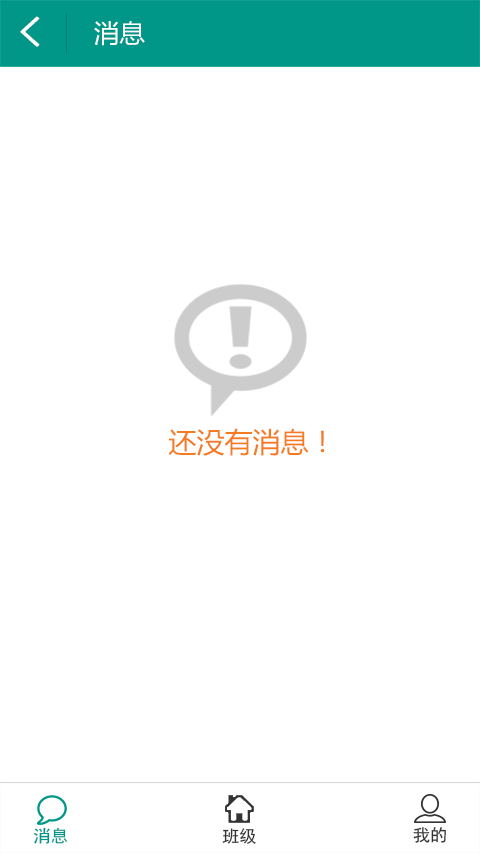
<style>
.page{position:relative;width:480px;height:853px;background:#ffffff}
.page>*{position:absolute;margin:0}
.t1{font:41.3px "SimHei";color:#ffffff;font-weight:bold}
.t2{font:25.3px "MicrosoftYaHei";color:#ffffff}
.t3{font:28px "MicrosoftYaHei";color:#f67b20}
.t4{font:17.3px "SimHei";color:#009788}
.t5{font:17.3px "SimHei";color:#333333}
</style>
<div class="page">
<p class="t1" style="left:20px;top:16px;width:20px;height:31px">&lt;</p>
<p class="t2" style="left:94px;top:21px;width:51px;height:25px">消息</p>
<p class="t3" style="left:168px;top:428px;width:157px;height:28px">还没有消息！</p>
<p class="t4" style="left:34px;top:827px;width:34px;height:17px">消息</p>
<p class="t5" style="left:222px;top:828px;width:34px;height:16px">班级</p>
<p class="t5" style="left:413px;top:827px;width:33px;height:16px">我的</p>
</div>
